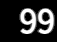
<style>
.page{position:relative;width:57px;height:42px;background:#000000}
.page>*{position:absolute;margin:0}
.t1{font:32px "WebPSD-18463539-0-Regular";color:#ffffff;font-weight:bold}
</style>
<div class="page">
<p class="t1" style="left:0px;top:0px;width:57px;height:42px">99</p>
</div>
